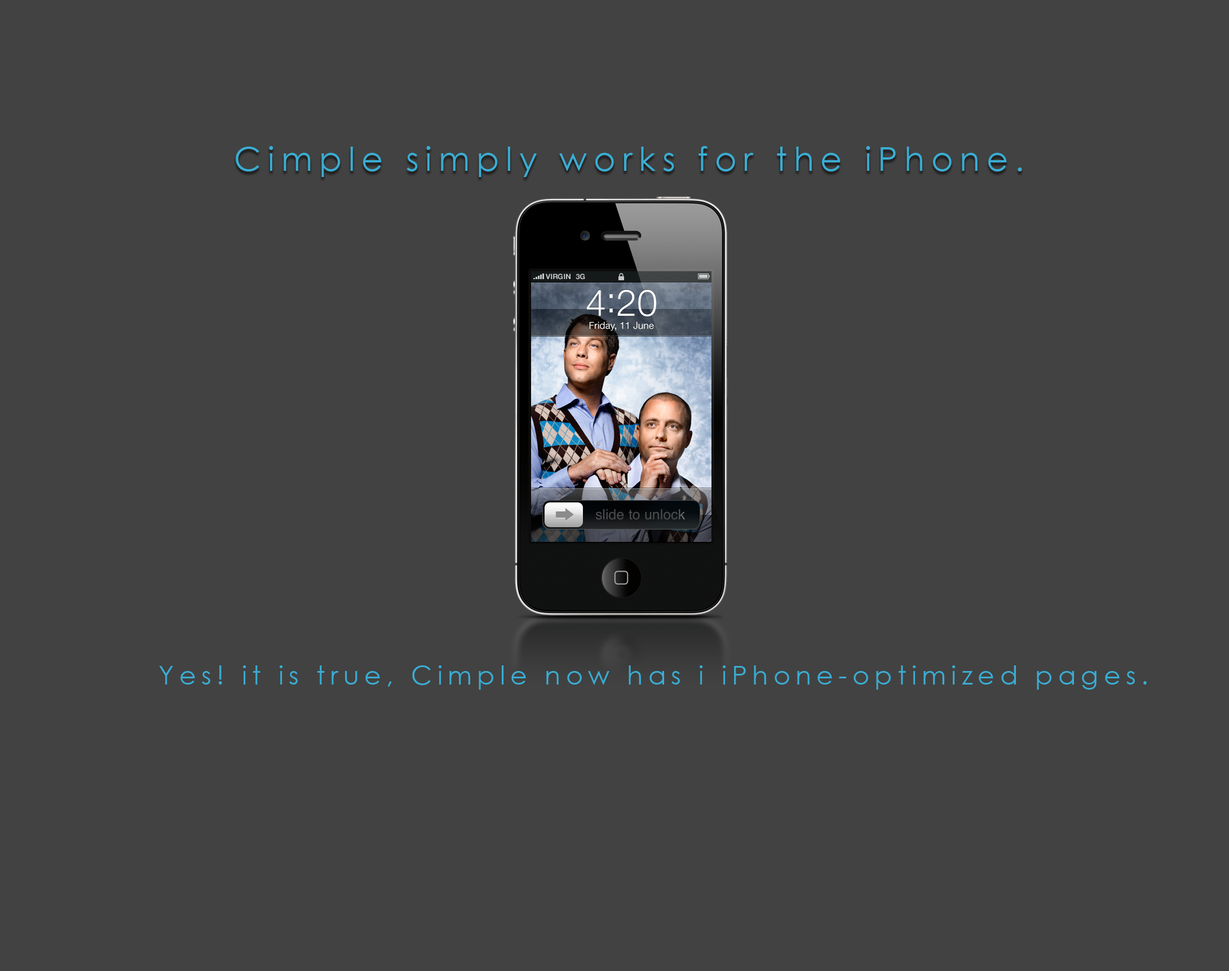
<style>
.page{position:relative;width:1229px;height:971px;background:#424242}
.page>*{position:absolute;margin:0}
.t1{font:33.3px "CenturyGothic";letter-spacing:0.2em;color:#3aadd3}
.t2{font:7.3px "HelveticaNeue-Bold";color:#c4c5c6;text-transform:uppercase}
.t3{font:36.6px "HelveticaNeue-Light";color:#ffffff}
.t4{font:9.6px "HelveticaNeue";color:#ffffff}
.t5{font:25.9px "CenturyGothic";letter-spacing:0.2em;color:#3aadd3}
</style>
<div class="page">
<p class="t1" style="left:236px;top:146px;width:786px;height:31px">Cimple simply works for the iPhone.</p>
<p class="t2" style="left:546px;top:273px;width:24px;height:7px">VIRGIN</p>
<p class="t2" style="left:575px;top:273px;width:10px;height:7px">3G</p>
<p class="t3" style="left:587px;top:290px;width:69px;height:26px">4:20</p>
<p class="t4" style="left:589px;top:321px;width:65px;height:10px">Friday, 11 June</p>
<p class="t5" style="left:159px;top:665px;width:987px;height:24px">Yes! it is true, Cimple now has i iPhone-optimized pages.</p>
</div>
